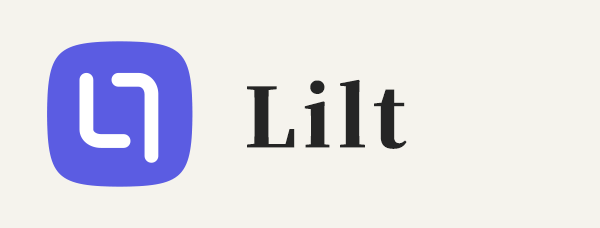
<style>
.page{position:relative;width:600px;height:228px;background:#f5f3ed}
.page>*{position:absolute;margin:0}
.t1{font:81.6px "SourceHanSerifSCVF-Heavy";letter-spacing:0.07em;color:#252525}
</style>
<div class="page">
<p class="t1" style="left:247px;top:79px;width:160px;height:70px">Lilt</p>
</div>
